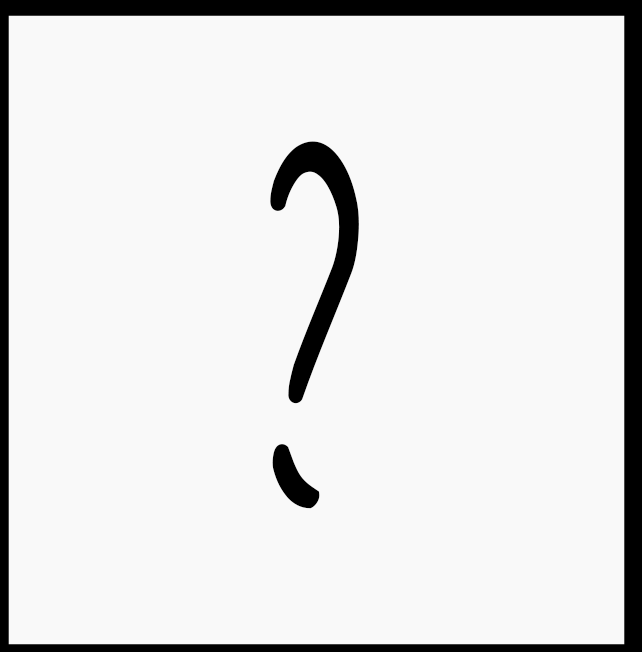
<style>
.page{position:relative;width:642px;height:652px;background:#f9f9f9}
.page>*{position:absolute;margin:0}
.t1{font:536px "MLingWaiMedium-TC";color:#000000;font-weight:bold;font-style:italic;scale:0.49 1}
</style>
<div class="page">
<p class="t1" style="left:270px;top:141px;width:89px;height:368px">?</p>
</div>
